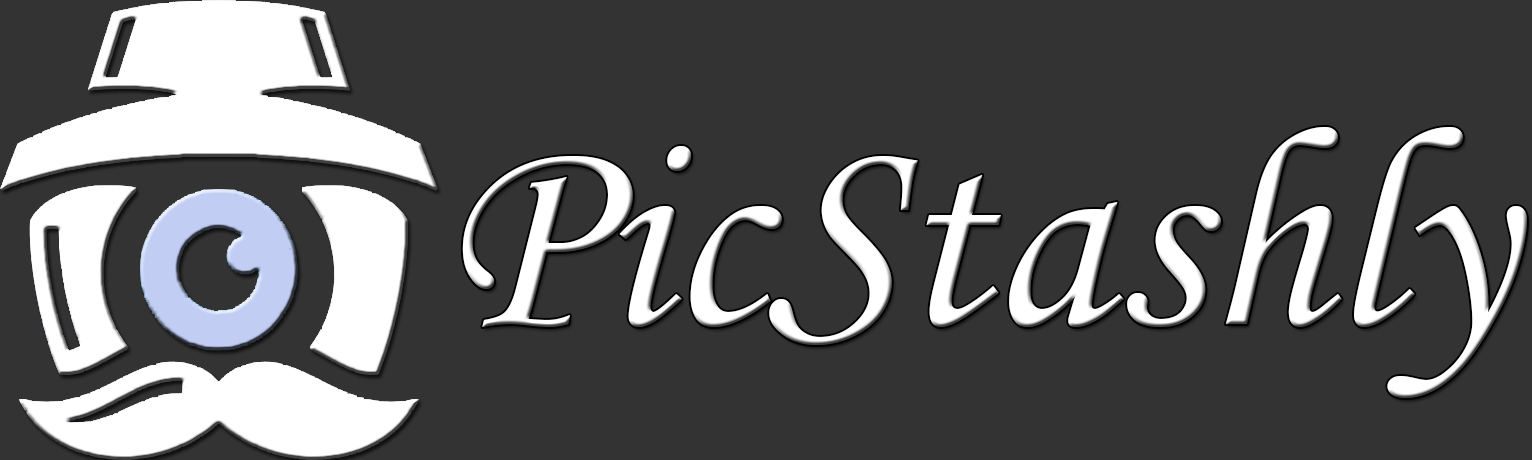
<style>
.page{position:relative;width:1532px;height:460px;background:#333333}
.page>*{position:absolute;margin:0}
.t1{font:287.5px "MonotypeCorsiva";color:#ffffff}
</style>
<div class="page">
<p class="t1" style="left:462px;top:127px;width:1065px;height:271px">PicStashly</p>
</div>
